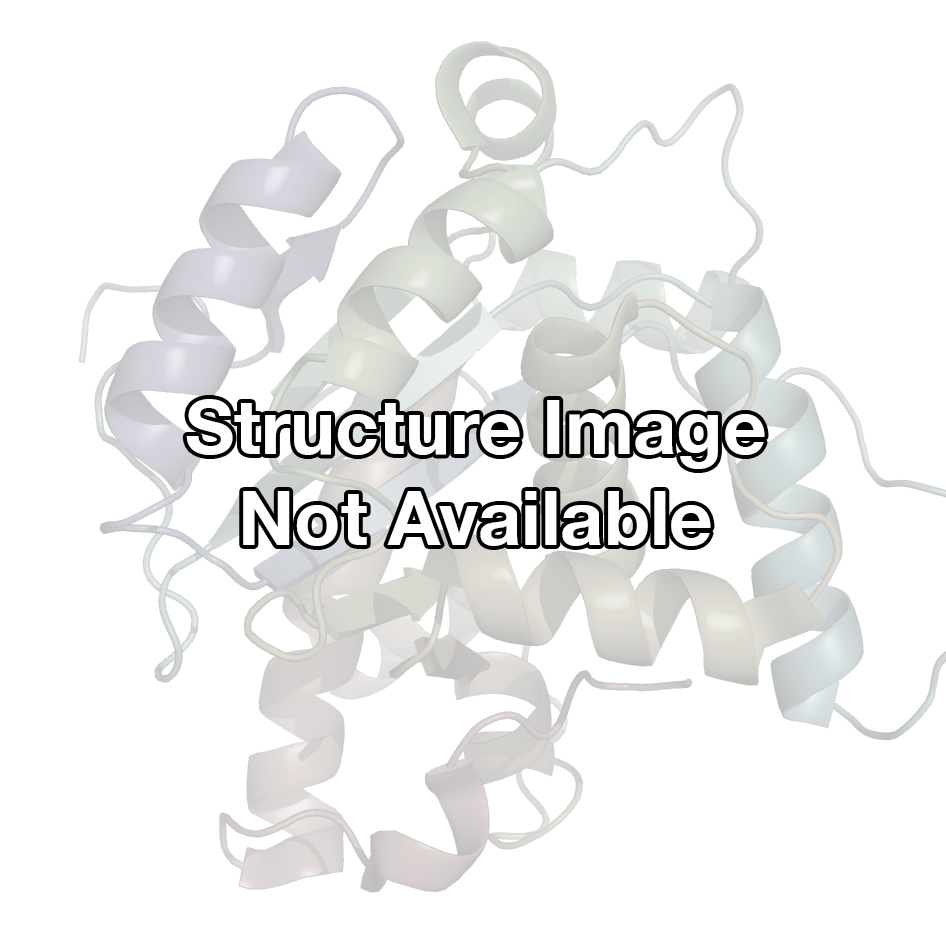
<style>
.page{position:relative;width:946px;height:946px;background:#ffffff}
.page>*{position:absolute;margin:0}
.t1{font:75.6px "HelveticaNeue-Bold";color:#ffffff}
</style>
<div class="page">
<p class="t1" style="left:186px;top:399px;width:579px;height:147px;text-align:center">Structure Image<br>Not Available</p>
</div>
